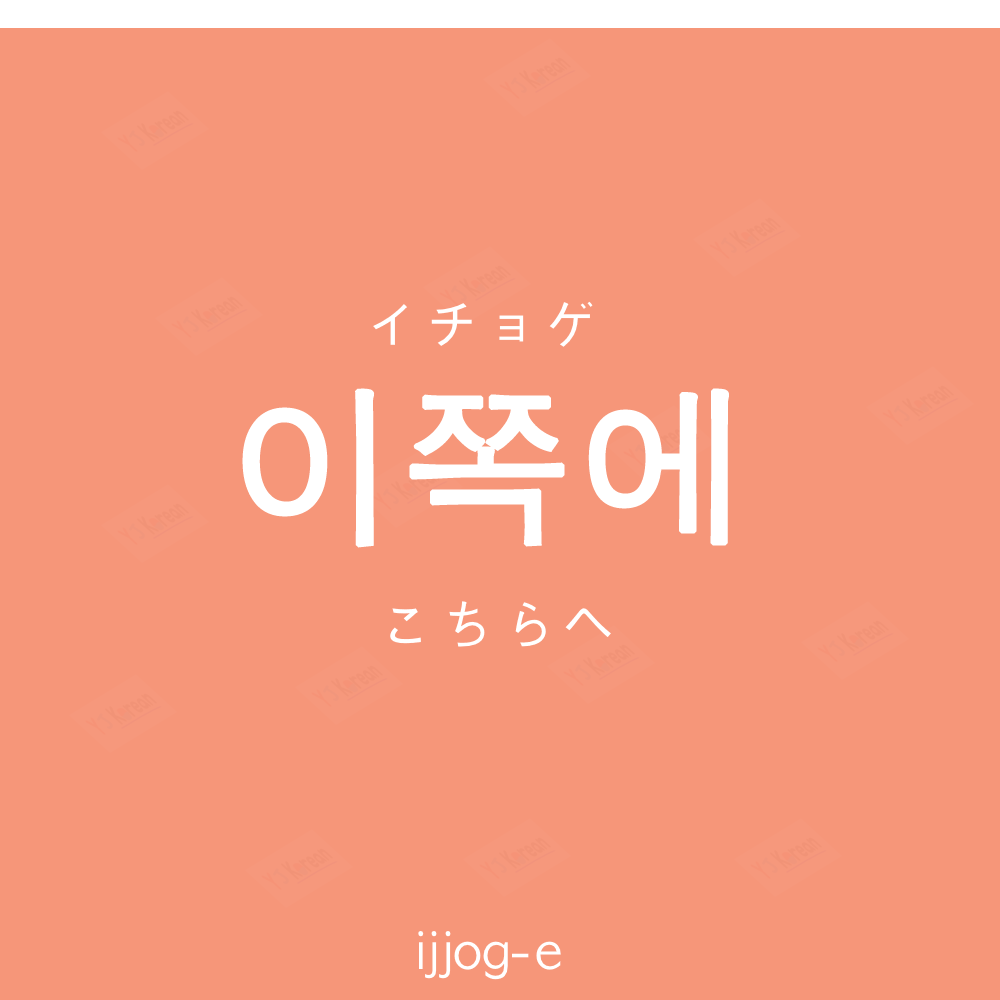
<style>
.page{position:relative;width:1000px;height:1000px;background:#f69679}
.page>*{position:absolute;margin:0}
.t1{font:60px "AppleGothic";color:#ffffff;text-transform:uppercase}
.t2{font:170px "AppleGothic";color:#ffffff;font-weight:bold}
.t3{font:60px "AppleGothic";color:#ffffff}
.t4{font:50px "AppleGothic";color:#ffffff}
</style>
<div class="page">
<p class="t1" style="left:373px;top:301px;width:220px;height:46px">イチョゲ</p>
<p class="t2" style="left:242px;top:388px;width:487px;height:160px">이쪽에</p>
<p class="t3" style="left:390px;top:601px;width:221px;height:46px">こちらへ</p>
<p class="t4" style="left:418px;top:931px;width:143px;height:49px">ijjog-e</p>
</div>
